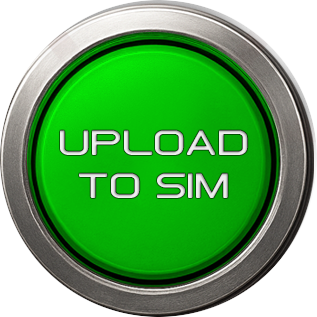
<style>
.page{position:relative;width:317px;height:317px;background:#ffffff}
.page>*{position:absolute;margin:0}
.t1{font:36px "Downlink";color:#e3e3e3}
</style>
<div class="page">
<p class="t1" style="left:60px;top:130px;width:188px;height:68px;text-align:center">UPLOAD<br>TO SIM</p>
</div>
